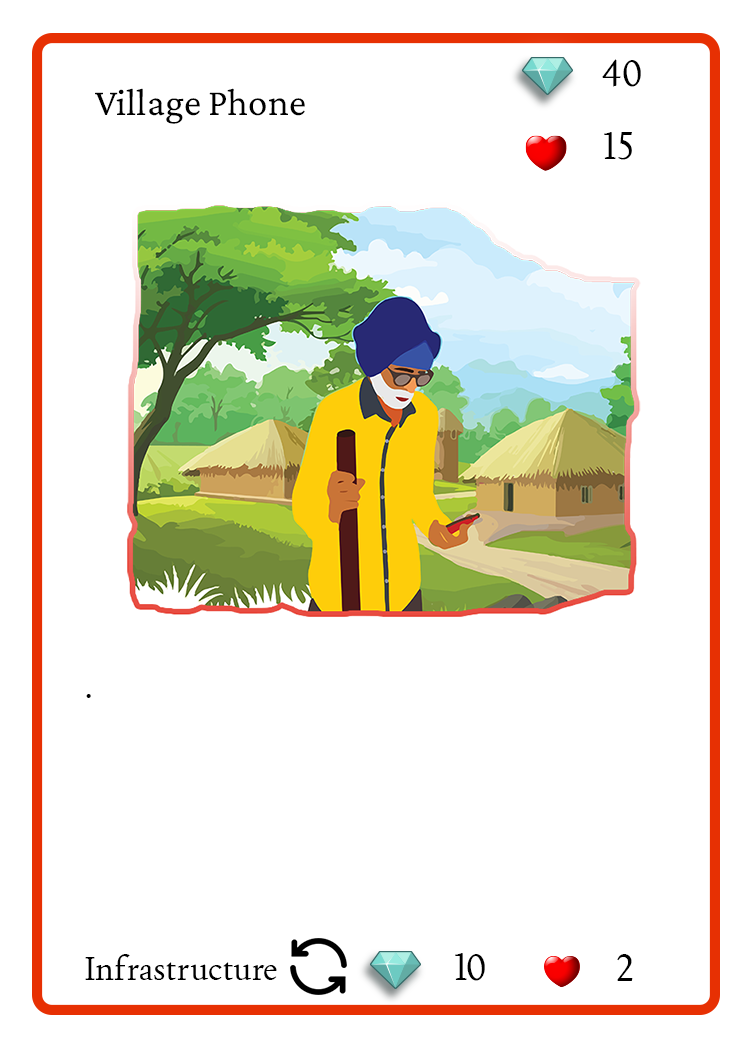
<style>
.page{position:relative;width:750px;height:1050px;background:#ffffff}
.page>*{position:absolute;margin:0}
.t1{font:37.5px "Joan-Regular";color:#000000;text-transform:uppercase}
.t2{font:38.9px "CrimsonPro-Regular";color:#000000}
.t3{font:33.3px "Joan-Regular";color:#000000}
</style>
<div class="page">
<p class="t1" style="left:602px;top:59px;width:39px;height:28px">40</p>
<p class="t2" style="left:95px;top:88px;width:210px;height:36px">Village Phone</p>
<p class="t1" style="left:604px;top:132px;width:28px;height:28px">15</p>
<p class="t3" style="left:86px;top:694px;width:5px;height:4px">.</p>
<p class="t1" style="left:455px;top:953px;width:30px;height:28px">10</p>
<p class="t3" style="left:85px;top:954px;width:192px;height:26px">Infrastructure</p>
<p class="t1" style="left:617px;top:954px;width:16px;height:27px">2</p>
</div>
